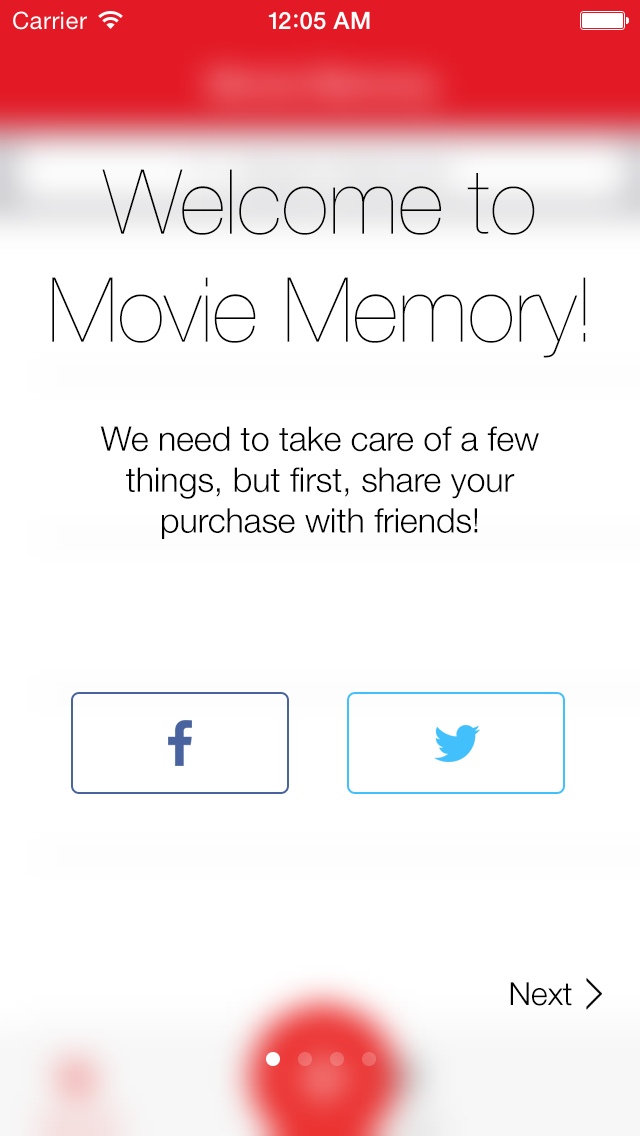
<style>
.page{position:relative;width:640px;height:1136px;background:#ffffff}
.page>*{position:absolute;margin:0}
.t1{font:90px "HelveticaNeue-UltraLight";color:#000000}
.t2{font:34px "HelveticaNeue-Light";color:#000000}
.t3{font:32px "HelveticaNeue-Light";color:#000000}
</style>
<div class="page">
<p class="t1" style="left:52px;top:169px;width:534px;height:189px;text-align:center">Welcome to<br>Movie Memory!</p>
<p class="t2" style="left:100px;top:426px;width:439px;height:113px;text-align:center">We need to take care of a few<br>things, but first, share your<br>purchase with friends!</p>
<p class="t3" style="left:510px;top:982px;width:62px;height:24px">Next</p>
</div>
